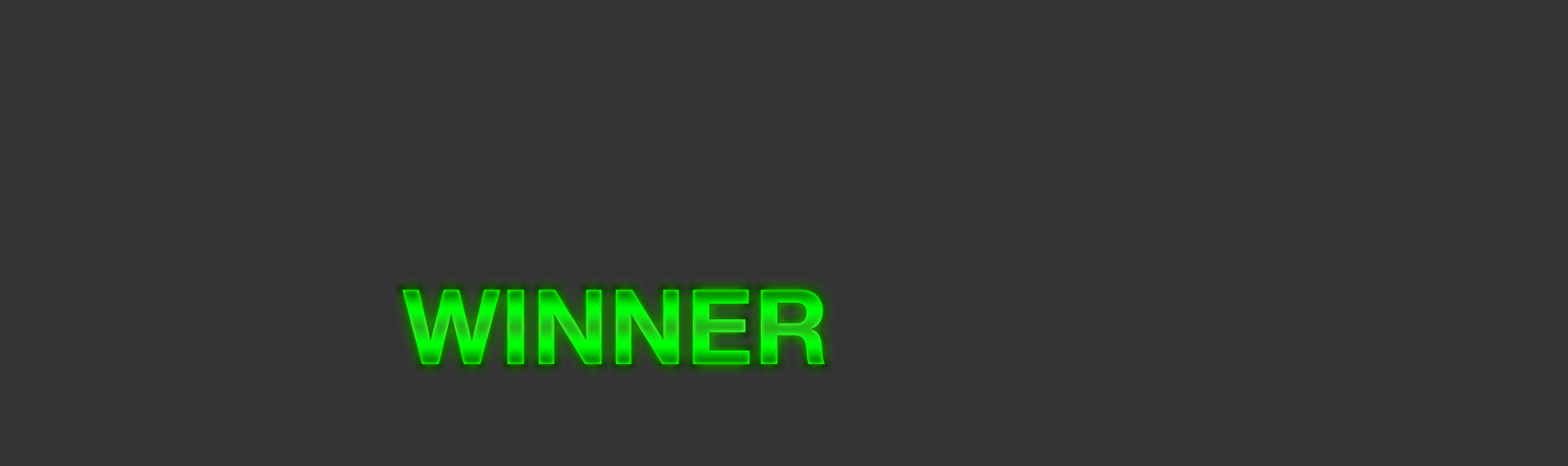
<style>
.page{position:relative;width:1568px;height:466px;background:#333333}
.page>*{position:absolute;margin:0}
.t1{font:104.3px "HelveticaNeue-Bold"}
</style>
<div class="page">
<p class="t1" style="left:402px;top:289px;width:423px;height:75px">WINNER</p>
</div>
